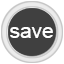
<style>
.page{position:relative;width:64px;height:64px;background:#404040}
.page>*{position:absolute;margin:0}
.t1{font:20.8px "ArialMT";color:#ffffff}
</style>
<div class="page">
<p class="t1" style="left:10px;top:27px;width:43px;height:11px">save</p>
</div>
